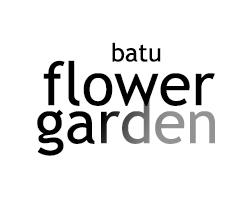
<style>
.page{position:relative;width:250px;height:200px;background:#ffffff}
.page>*{position:absolute;margin:0}
.t1{font:25px "TrebuchetMS";color:#000000}
.t2{font:60px "TrebuchetMS";color:#000000}
.t3{font:60px "TrebuchetMS"}
</style>
<div class="page">
<p class="t1" style="left:112px;top:42px;width:49px;height:20px">batu</p>
<p class="t1" style="left:112px;top:42px;width:49px;height:20px">batu</p>
<p class="t2" style="left:43px;top:60px;width:172px;height:46px">flower</p>
<p class="t2" style="left:43px;top:60px;width:172px;height:46px">flower</p>
<p class="t3" style="left:37px;top:98px;width:178px;height:58px">garden</p>
<p class="t3" style="left:37px;top:98px;width:178px;height:58px">garden</p>
</div>
